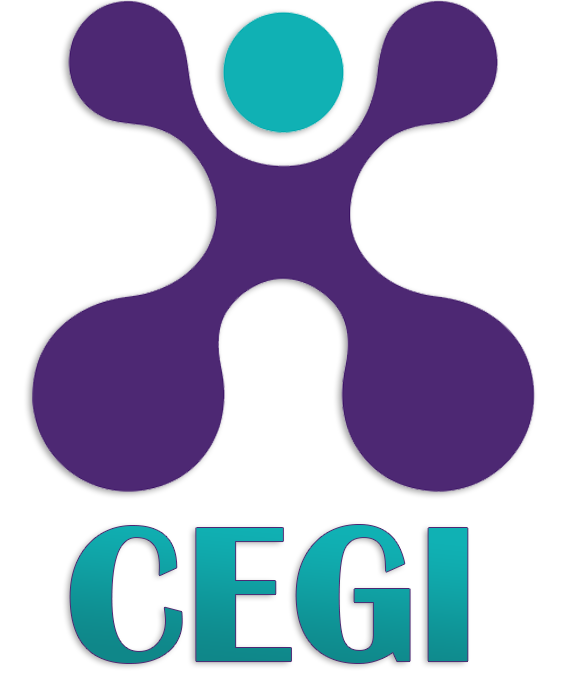
<style>
.page{position:relative;width:566px;height:700px;background:#ffffff}
.page>*{position:absolute;margin:0}
.t1{font:200px "BritannicBold";color:#109c9e}
</style>
<div class="page">
<p class="t1" style="left:70px;top:525px;width:398px;height:138px">CEGI</p>
</div>
